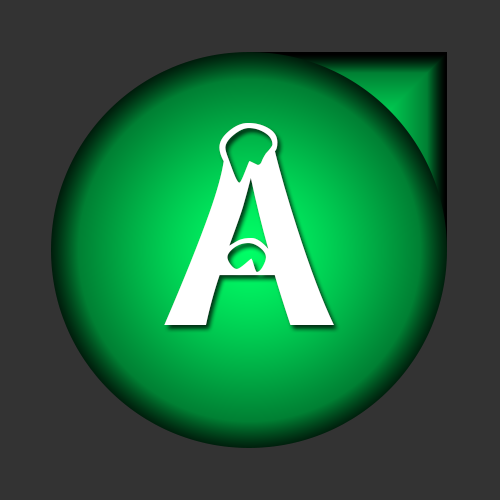
<style>
.page{position:relative;width:500px;height:500px;background:#333333}
.page>*{position:absolute;margin:0}
.t1{font:250px "Snowdrift";color:#ffffff}
</style>
<div class="page">
<p class="t1" style="left:164px;top:123px;width:170px;height:202px">A</p>
</div>
